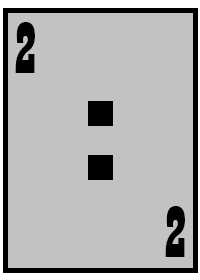
<style>
.page{position:relative;width:200px;height:280px;background:#c2c2c2}
.page>*{position:absolute;margin:0}
.t1{font:75px "Playbill";color:#000000}
</style>
<div class="page">
<p class="t1" style="left:15px;top:22px;width:20px;height:51px">2</p>
<p class="t1" style="left:165px;top:206px;width:20px;height:51px">2</p>
</div>
